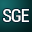
<style>
.page{position:relative;width:32px;height:32px}
.page>*{position:absolute;margin:0}
.t1{font:18px "Roboto-Condensed";letter-spacing:-0.05em;color:#ffffff}
</style>
<div class="page">
<p class="t1" style="left:3px;top:9px;width:26px;height:13px">SGE</p>
</div>
